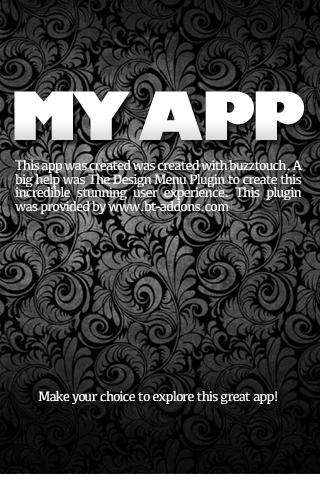
<style>
.page{position:relative;width:320px;height:480px}
.page>*{position:absolute;margin:0}
.t1{font:65.1px "GillSans-UltraBold";letter-spacing:-0.1em;color:#ffffff}
.t2{font:14.2px/13.5px "Kefa-Regular";letter-spacing:-0.06em;color:#fcfbfb}
.t3{font:14.2px "Kefa-Regular";letter-spacing:-0.06em;color:#fcfbfb}
</style>
<div class="page">
<p class="t1" style="left:14px;top:91px;width:290px;height:49px">MY APP</p>
<p class="t2" style="left:15px;top:160px;width:287px;height:54px;text-align:justify">This app was created was created with buzztouch. A big help was The Design Menu Plugin to create this incredible stunning user experience. This plugin was provided by www.bt-addons.com</p>
<p class="t3" style="left:38px;top:391px;width:239px;height:13px">Make your choice to explore this great app!</p>
</div>
